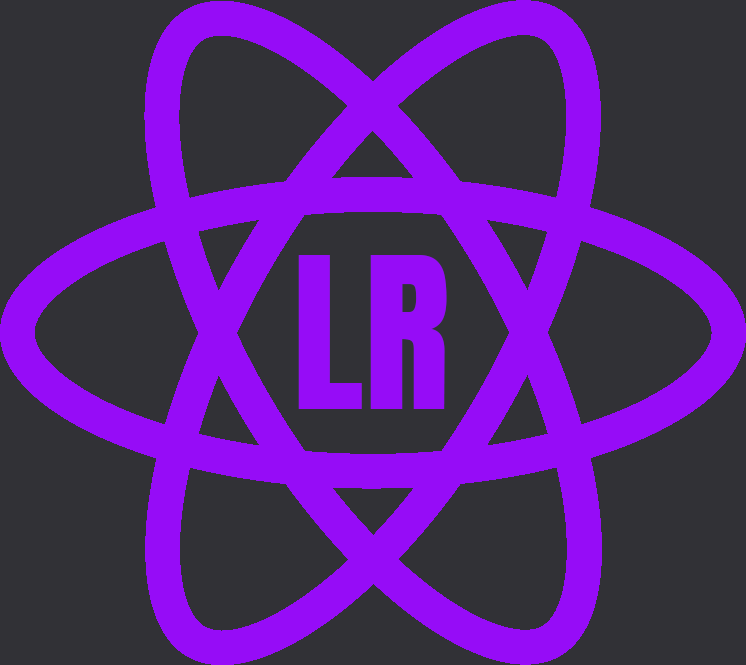
<style>
.page{position:relative;width:746px;height:665px;background:#313136}
.page>*{position:absolute;margin:0}
.t1{font:180px "Anton-Regular";color:#960cf7}
</style>
<div class="page">
<p class="t1" style="left:298px;top:255px;width:149px;height:154px">LR</p>
</div>
